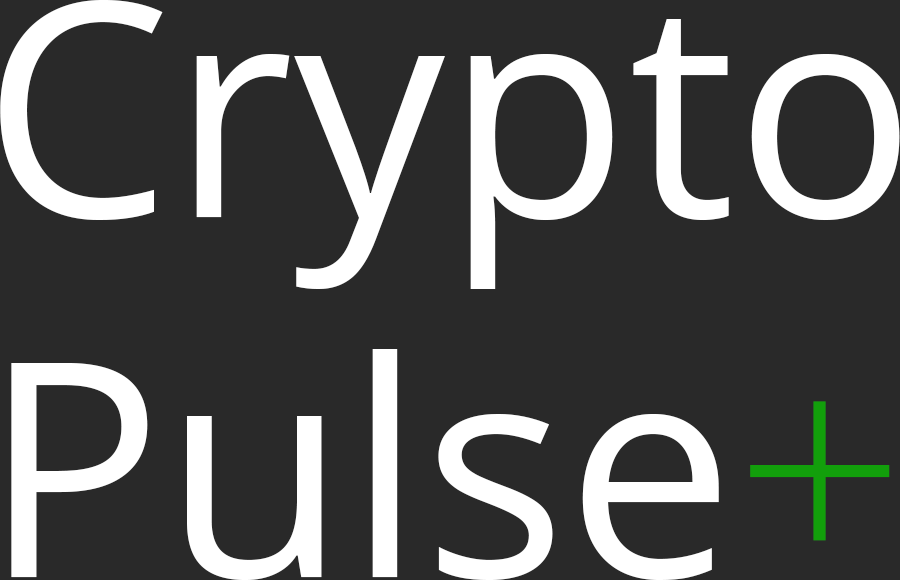
<style>
.page{position:relative;width:900px;height:580px;background:#292929}
.page>*{position:absolute;margin:0}
.t1{font:300px "OpenSans";color:#ffffff}
.t2{font:300px "OpenSans-Light";color:#129f0b}
</style>
<div class="page">
<p class="t1" style="left:0px;top:0px;width:900px;height:580px">Crypto<br>Pulse<span class="t2">+</span></p>
</div>
